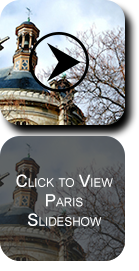
<style>
.page{position:relative;width:139px;height:271px}
.page>*{position:absolute;margin:0}
.t1{font:16.7px/19.4px "ArialMT";color:#ffffff;font-variant:small-caps}
</style>
<div class="page">
<p class="t1" style="left:16px;top:174px;width:97px;height:52px;text-align:center">Click to View Paris<br>Slideshow</p>
</div>
